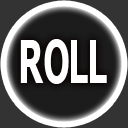
<style>
.page{position:relative;width:128px;height:128px;background:#ffffff}
.page>*{position:absolute;margin:0}
.t1{font:59.2px "Verdana-Bold";letter-spacing:0.02em;color:#ffffff;scale:0.54 1}
</style>
<div class="page">
<p class="t1" style="left:20px;top:39px;width:87px;height:45px">ROLL</p>
</div>
